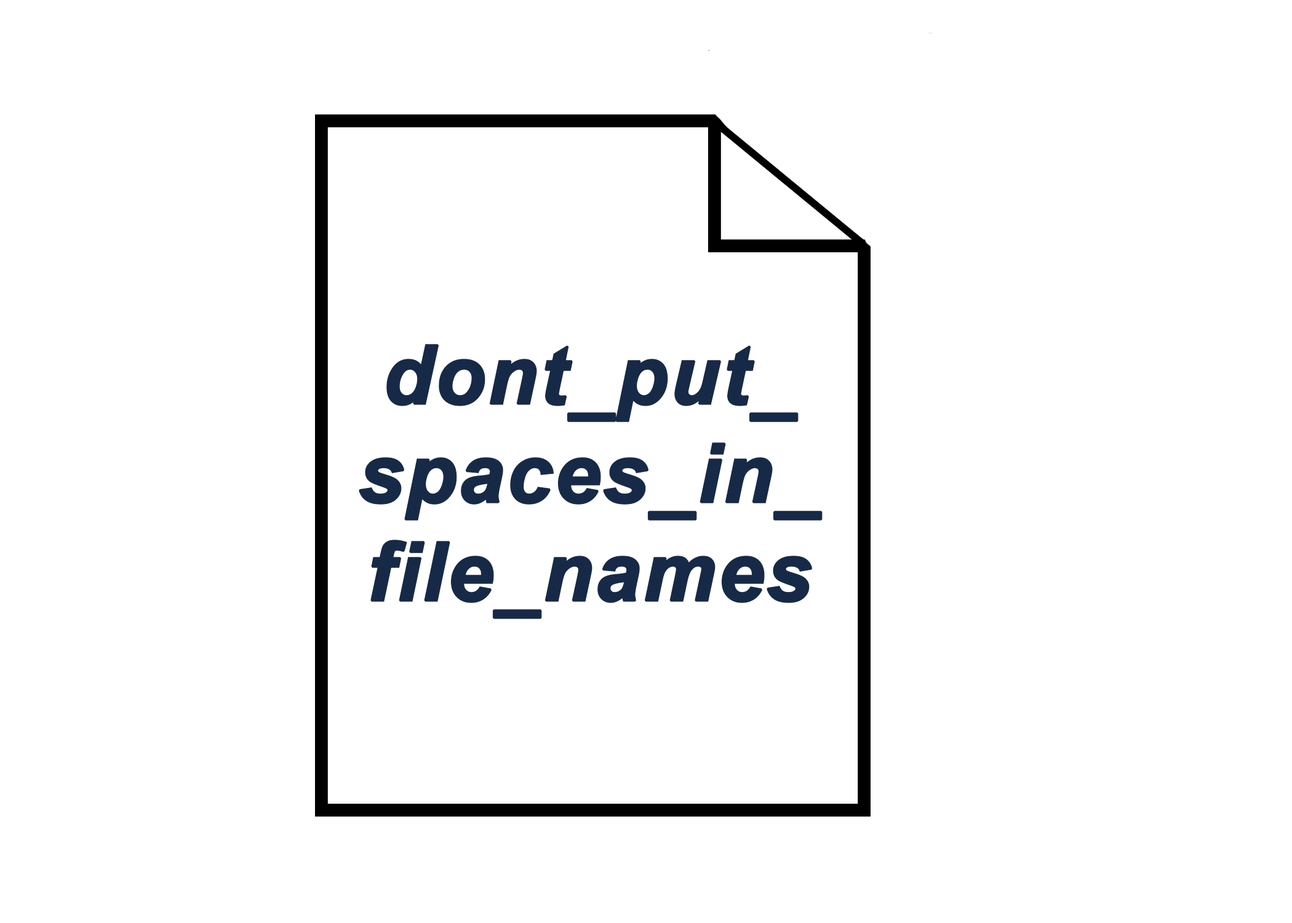
<style>
.page{position:relative;width:1292px;height:923px;background:#ffffff}
.page>*{position:absolute;margin:0}
.t1{font:82px "Arial-BoldItalicMT";color:#162a47;font-weight:bold}
</style>
<div class="page">
<p class="t1" style="left:359px;top:344px;width:464px;height:275px;text-align:center">dont_put_<br>spaces_in_<br>file_names</p>
</div>
